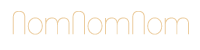
<style>
.page{position:relative;width:200px;height:50px;background:#ffffff}
.page>*{position:absolute;margin:0}
.t1{font:31.3px "ClementePDaa-Hairline";color:#eccd9f}
</style>
<div class="page">
<p class="t1" style="left:12px;top:11px;width:177px;height:24px">NomNomNom</p>
</div>
